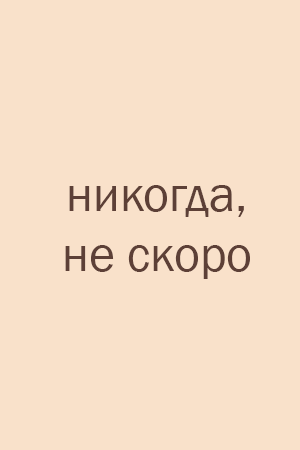
<style>
.page{position:relative;width:300px;height:450px;background:#f9e1ca}
.page>*{position:absolute;margin:0}
.t1{font:50px "FranklinGothic-Book";color:#5d4037}
</style>
<div class="page">
<p class="t1" style="left:65px;top:185px;width:185px;height:94px;text-align:center">никогда,<br>не скоро</p>
</div>
